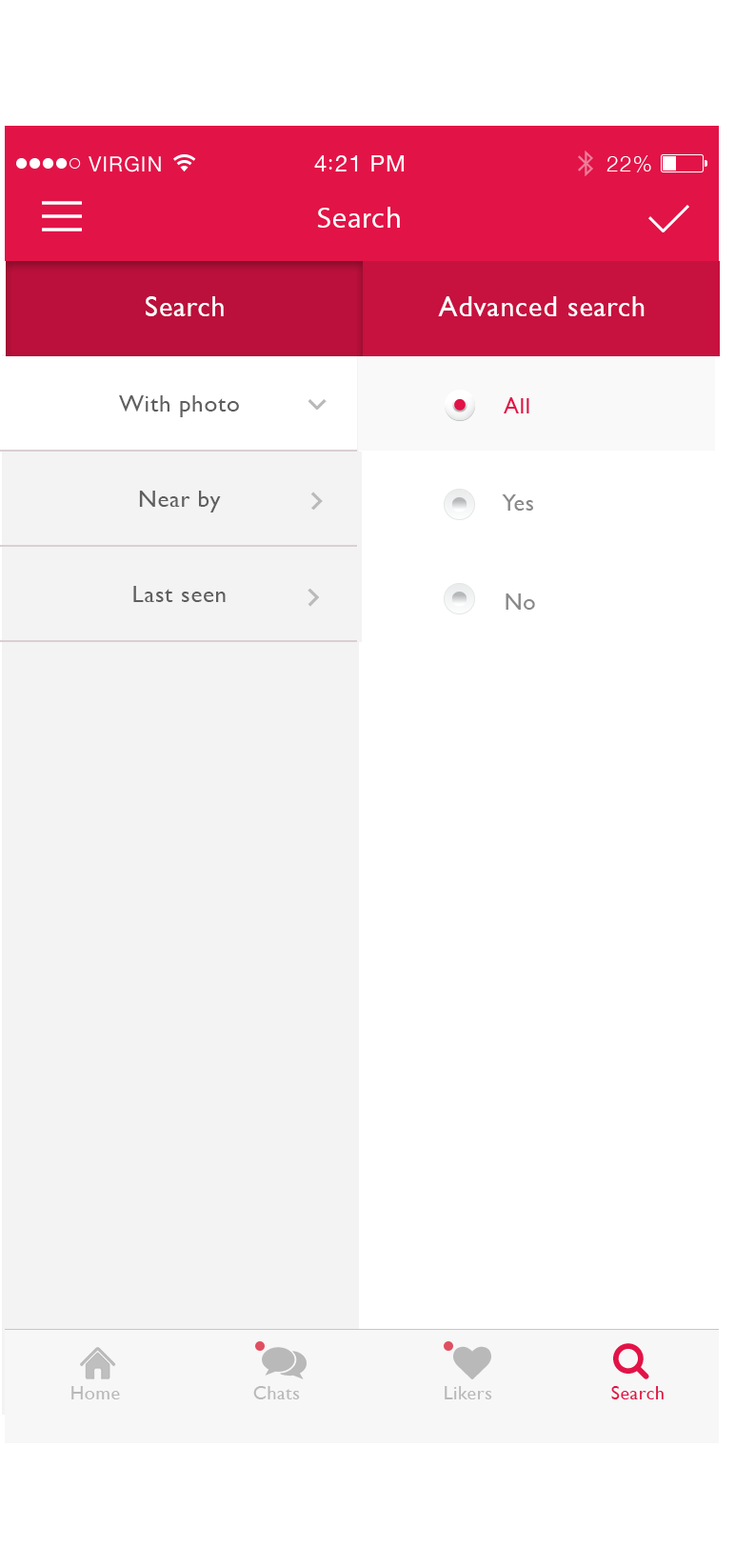
<style>
.page{position:relative;width:755px;height:1568px;background:#ffffff}
.page>*{position:absolute;margin:0}
.t1{font:28.6px "MyriadPro-Regular";letter-spacing:0.029em;color:#ffffff}
.t2{font:28.6px "GillSans";letter-spacing:0.029em;color:#ffffff}
.t3{font:23.8px "GillSans";letter-spacing:0.029em;color:#5f5f5f}
.t4{font:22.9px "GillSans";letter-spacing:0.029em;color:#e21347}
.t5{font:22.9px "GillSans";letter-spacing:0.029em;color:#898989}
.t6{font:19.1px "GillSans";letter-spacing:0.029em;color:#b9b9b9}
.t7{font:19.1px "GillSans";letter-spacing:0.029em;color:#e21347}
</style>
<div class="page">
<p class="t1" style="left:317px;top:207px;width:83px;height:21px">Search</p>
<p class="t2" style="left:146px;top:296px;width:78px;height:20px">Search</p>
<p class="t2" style="left:438px;top:296px;width:207px;height:20px">Advanced search</p>
<p class="t3" style="left:119px;top:395px;width:120px;height:22px">With photo</p>
<p class="t4" style="left:504px;top:397px;width:26px;height:16px">All</p>
<p class="t3" style="left:139px;top:491px;width:82px;height:22px">Near by</p>
<p class="t5" style="left:502px;top:494px;width:31px;height:17px">Yes</p>
<p class="t3" style="left:133px;top:586px;width:93px;height:16px">Last seen</p>
<p class="t5" style="left:506px;top:593px;width:29px;height:17px">No</p>
<p class="t6" style="left:71px;top:1386px;width:49px;height:13px">Home</p>
<p class="t6" style="left:253px;top:1386px;width:47px;height:13px">Chats</p>
<p class="t6" style="left:445px;top:1386px;width:48px;height:13px">Likers</p>
<p class="t7" style="left:612px;top:1386px;width:52px;height:13px">Search</p>
</div>
